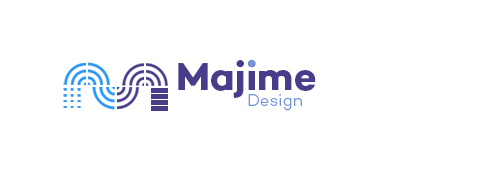
<style>
.page{position:relative;width:499px;height:182px;background:#ffffff}
.page>*{position:absolute;margin:0}
.t1{font:40px "Campton-BoldDEMO";color:#483d8b}
.t2{font:17px "Campton-LightDEMO";color:#7495d7}
</style>
<div class="page">
<p class="t1" style="left:178px;top:60px;width:138px;height:38px">Majime</p>
<p class="t2" style="left:248px;top:94px;width:54px;height:17px">Design</p>
</div>
